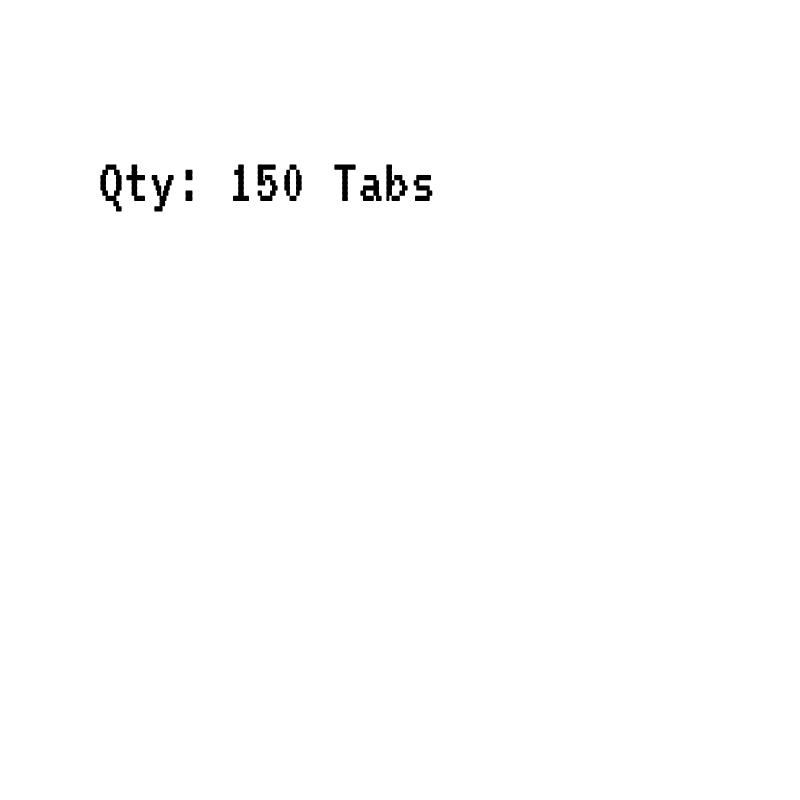
<style>
.page{position:relative;width:800px;height:800px;background:#ffffff}
.page>*{position:absolute;margin:0}
.t1{font:65px "VT323-Regular";color:#000000}
</style>
<div class="page">
<p class="t1" style="left:100px;top:164px;width:333px;height:48px">Qty: 150 Tabs</p>
</div>
